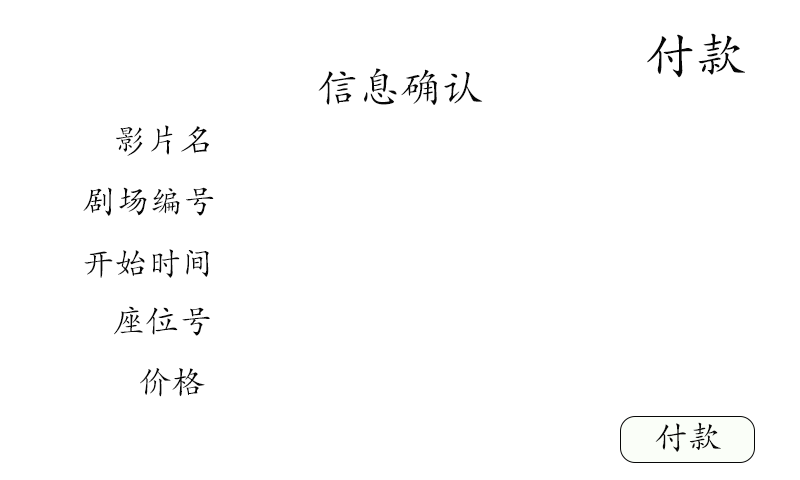
<style>
.page{position:relative;width:800px;height:480px;background:#ffffff}
.page>*{position:absolute;margin:0}
.t1{font:50px "STKaiti";color:#070707}
.t2{font:41.7px "STKaiti";color:#070707}
.t3{font:33.3px "STKaiti";color:#070707}
</style>
<div class="page">
<p class="t1" style="left:647px;top:33px;width:98px;height:45px">付款</p>
<p class="t2" style="left:318px;top:68px;width:165px;height:37px">信息确认</p>
<p class="t3" style="left:116px;top:125px;width:93px;height:31px">影片名</p>
<p class="t3" style="left:83px;top:187px;width:131px;height:29px">剧场编号</p>
<p class="t3" style="left:84px;top:249px;width:125px;height:29px">开始时间</p>
<p class="t3" style="left:114px;top:306px;width:96px;height:30px">座位号</p>
<p class="t3" style="left:140px;top:368px;width:65px;height:29px">价格</p>
<p class="t3" style="left:655px;top:422px;width:66px;height:30px">付款</p>
</div>
